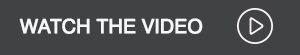
<style>
.page{position:relative;width:300px;height:55px;background:#404244}
.page>*{position:absolute;margin:0}
.t1{font:19.4px "Swiss721BT-Roman";letter-spacing:-0.01em;color:#f6f7f8;font-weight:bold}
</style>
<div class="page">
<p class="t1" style="left:19px;top:18px;width:184px;height:16px">WATCH THE VIDEO</p>
</div>
